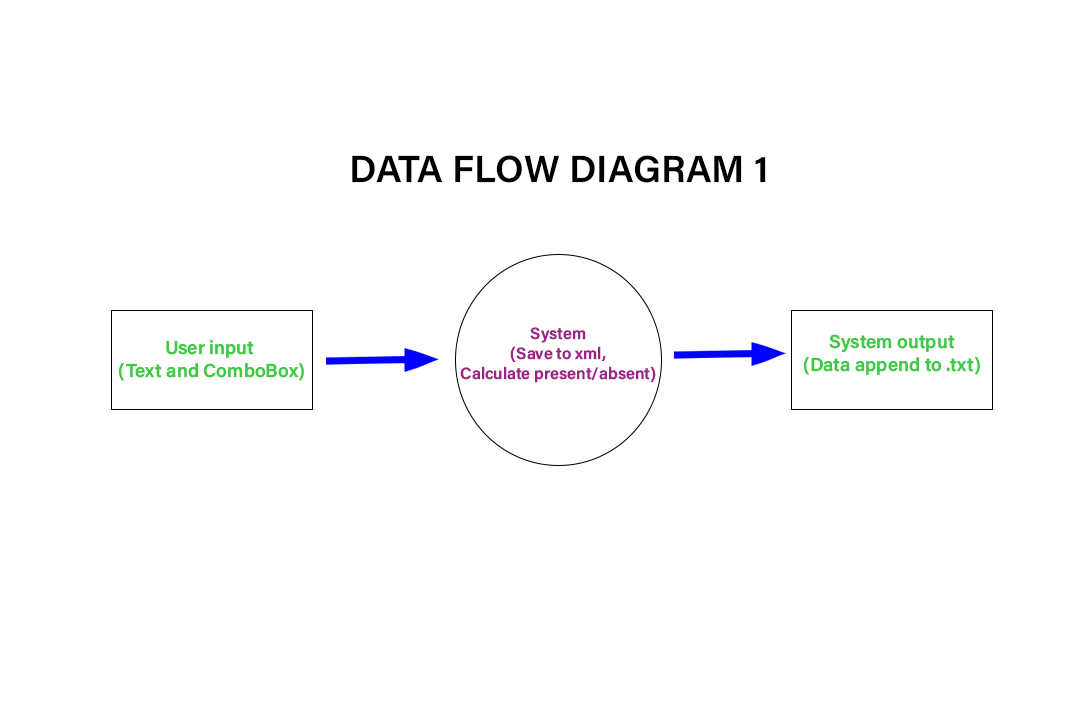
<style>
.page{position:relative;width:1080px;height:720px;background:#ffffff}
.page>*{position:absolute;margin:0}
.t1{font:37.7px "AcuminConcept-Semibold";color:#000000}
.t2{font:16.4px "AcuminConcept-Semibold";color:#9c2289}
.t3{font:18.9px "AcuminConcept-Semibold";color:#3fca45}
</style>
<div class="page">
<p class="t1" style="left:352px;top:155px;width:414px;height:28px">DATA FLOW DIAGRAM 1</p>
<p class="t2" style="left:460px;top:327px;width:196px;height:56px;text-align:center">System<br>(Save to xml,<br>Calculate present/absent)</p>
<p class="t3" style="left:118px;top:340px;width:186px;height:41px;text-align:center">User input <br>(Text and ComboBox)</p>
<p class="t3" style="left:803px;top:334px;width:177px;height:41px;text-align:center">System output<br>(Data append to .txt)</p>
</div>
